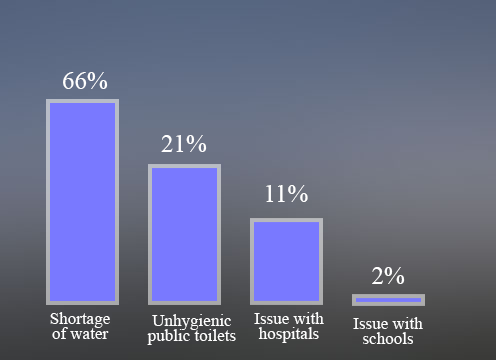
<style>
.page{position:relative;width:496px;height:360px}
.page>*{position:absolute;margin:0}
.t1{font:25px "TimesNewRomanPSMT";color:#ffffff}
.t2{font:17px/15px "TimesNewRomanPSMT";color:#ffffff}
</style>
<div class="page">
<p class="t1" style="left:63px;top:72px;width:45px;height:17px">66%</p>
<p class="t1" style="left:161px;top:135px;width:46px;height:17px">21%</p>
<p class="t1" style="left:266px;top:185px;width:42px;height:17px">11%</p>
<p class="t1" style="left:372px;top:267px;width:33px;height:17px">2%</p>
<p class="t2" style="left:50px;top:312px;width:60px;height:27px;text-align:center">Shortage<br>of water</p>
<p class="t2" style="left:147px;top:314px;width:89px;height:31px;text-align:center">Unhygienic<br>public toilets</p>
<p class="t2" style="left:254px;top:312px;width:70px;height:31px;text-align:center">Issue with<br>hospitals</p>
<p class="t2" style="left:353px;top:317px;width:70px;height:27px;text-align:center">Issue with<br>schools</p>
</div>
